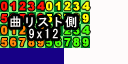
<style>
.page{position:relative;width:128px;height:64px;background:#fefbfb}
.page>*{position:absolute;margin:0}
.t1{font:11px/12px "Arial-Black";letter-spacing:0.135em;color:#ff1408;font-weight:bold}
.t2{font:11px/12px "Arial-Black";letter-spacing:0.135em;color:#fffc08;font-weight:bold}
.t3{font:12px/12px "MS-Gothic";letter-spacing:0.135em;color:#faf8f6;font-weight:bold}
.t4{font:11px/12px "Arial-Black";letter-spacing:0.135em;color:#ff8808;font-weight:bold}
</style>
<div class="page">
<p class="t1" style="left:1px;top:1px;width:44px;height:22px">01234<br>56789</p>
<p class="t2" style="left:46px;top:1px;width:44px;height:22px">01234<br>56789</p>
<p class="t3" style="left:10px;top:16px;width:67px;height:23px;text-align:center">曲リスト側<br>9x12</p>
<p class="t4" style="left:1px;top:25px;width:44px;height:22px">01234<br>56789</p>
</div>
